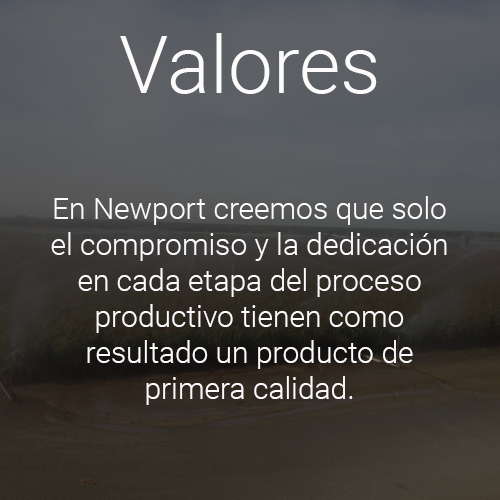
<style>
.page{position:relative;width:500px;height:500px}
.page>*{position:absolute;margin:0}
.t1{font:80px "Roboto-Light";color:#fcfafa}
.t2{font:30px "Roboto-Light";color:#fcfafa}
</style>
<div class="page">
<p class="t1" style="left:120px;top:33px;width:257px;height:61px">Valores</p>
<p class="t2" style="left:51px;top:196px;width:396px;height:209px;text-align:center">En Newport creemos que solo el compromiso y la dedicación en cada etapa del proceso productivo tienen como resultado un producto de primera calidad.</p>
</div>
